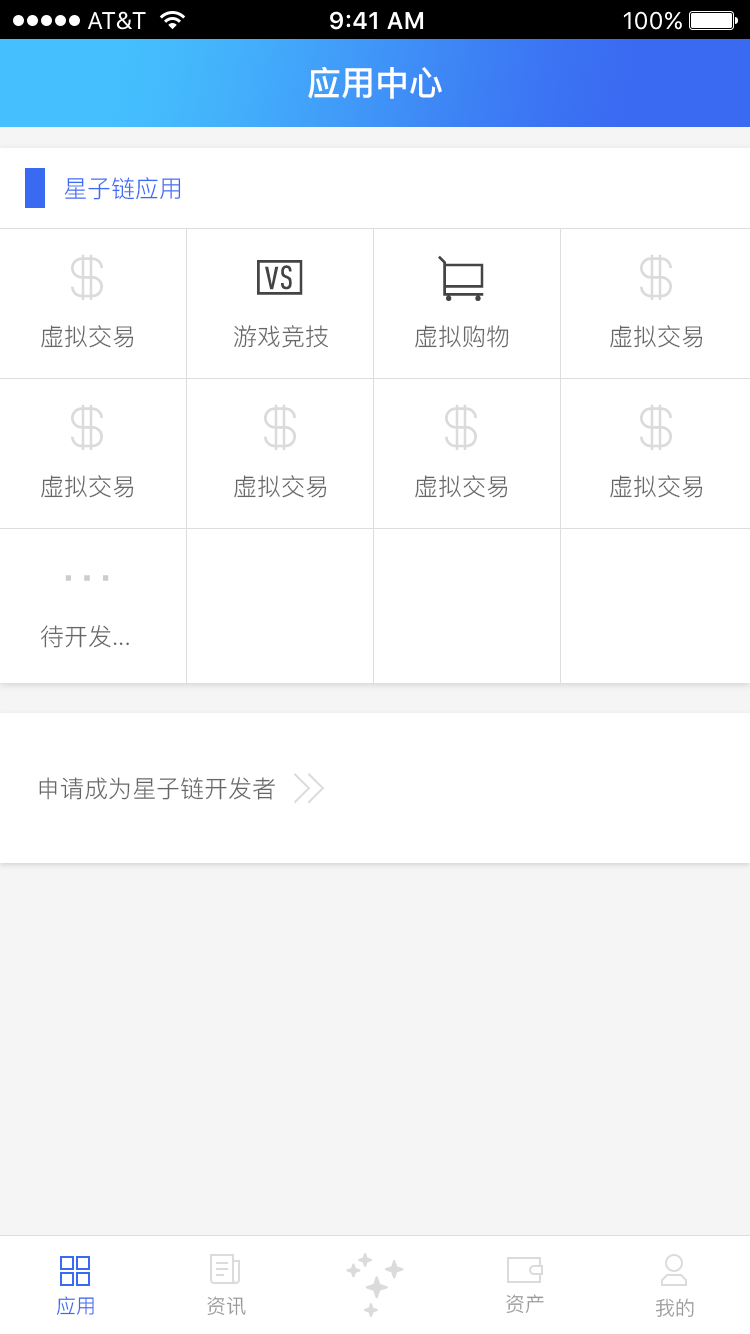
<style>
.page{position:relative;width:750px;height:1334px;background:#ffffff}
.page>*{position:absolute;margin:0}
.t1{font:34px "PingFang-SC-Bold";color:#ffffff}
.t2{font:24px "PingFang-SC-Regular";color:#3a6af2}
.t3{font:24px "PingFang-SC-Regular";color:#666666}
.t4{font:20px "PingFang-SC-Regular";color:#3a6af2}
.t5{font:20px "PingFang-SC-Regular";color:#999999}
</style>
<div class="page">
<p class="t1" style="left:308px;top:67px;width:134px;height:32px">应用中心</p>
<p class="t2" style="left:64px;top:177px;width:117px;height:23px">星子链应用</p>
<p class="t3" style="left:41px;top:325px;width:93px;height:23px">虚拟交易</p>
<p class="t3" style="left:234px;top:325px;width:94px;height:23px">游戏竞技</p>
<p class="t3" style="left:415px;top:325px;width:94px;height:23px">虚拟购物</p>
<p class="t3" style="left:610px;top:325px;width:93px;height:23px">虚拟交易</p>
<p class="t3" style="left:41px;top:475px;width:93px;height:23px">虚拟交易</p>
<p class="t3" style="left:234px;top:475px;width:93px;height:23px">虚拟交易</p>
<p class="t3" style="left:415px;top:475px;width:93px;height:23px">虚拟交易</p>
<p class="t3" style="left:610px;top:475px;width:93px;height:23px">虚拟交易</p>
<p class="t3" style="left:41px;top:625px;width:88px;height:23px">待开发...</p>
<p class="t3" style="left:39px;top:777px;width:236px;height:23px">申请成为星子链开发者</p>
<p class="t4" style="left:57px;top:1296px;width:37px;height:19px">应用</p>
<p class="t5" style="left:207px;top:1296px;width:39px;height:20px">资讯</p>
<p class="t5" style="left:506px;top:1294px;width:38px;height:19px">资产</p>
<p class="t5" style="left:655px;top:1298px;width:39px;height:19px">我的</p>
</div>
